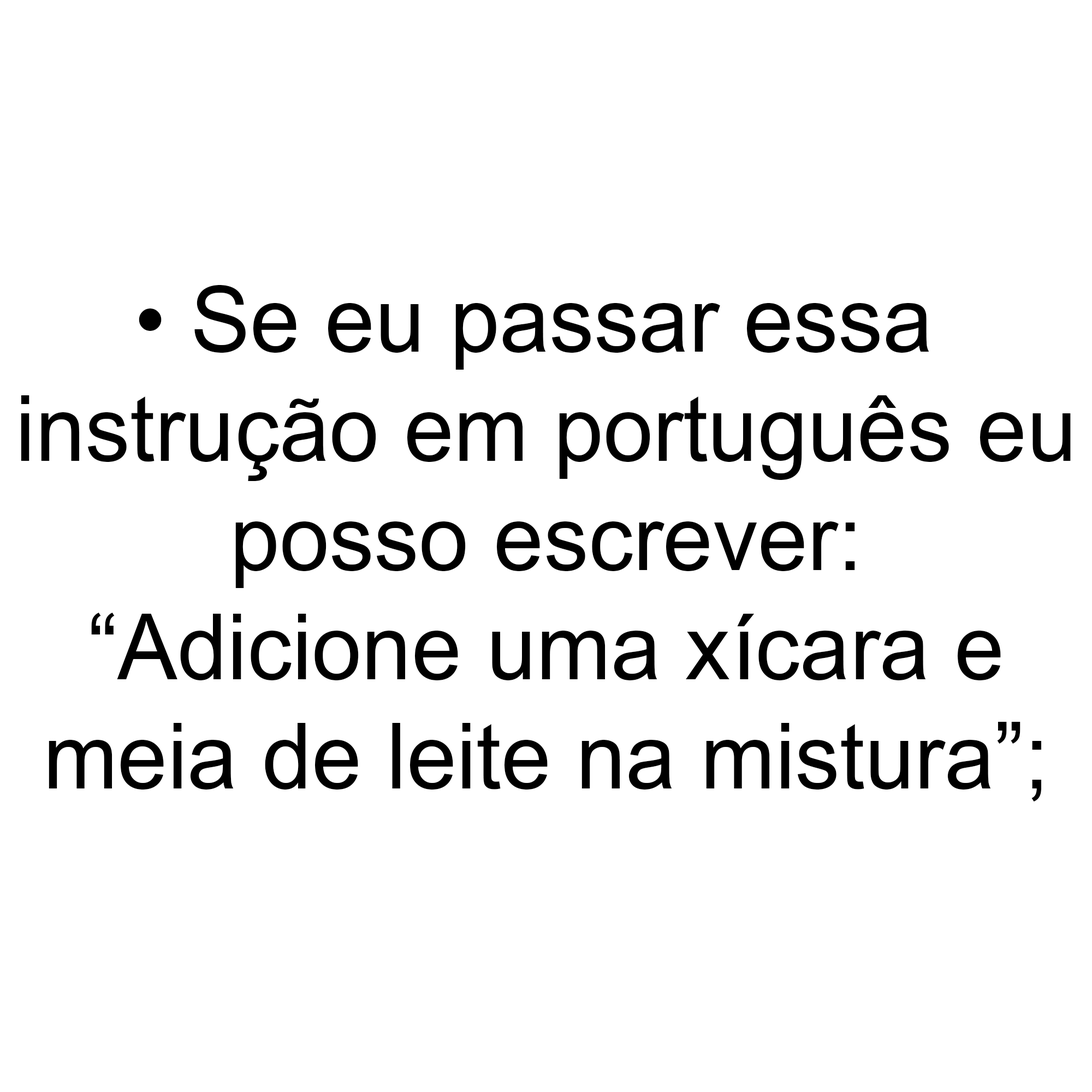
<style>
.page{position:relative;width:1092px;height:1092px;background:#ffffff}
.page>*{position:absolute;margin:0}
.t1{font:91px "ArialMT";color:#000000}
</style>
<div class="page">
<p class="t1" style="left:21px;top:285px;width:1050px;height:517px;text-align:center">• Se eu passar essa <br>instrução em português eu<br>posso escrever:<br>“Adicione uma xícara e<br>meia de leite na mistura”;</p>
</div>
